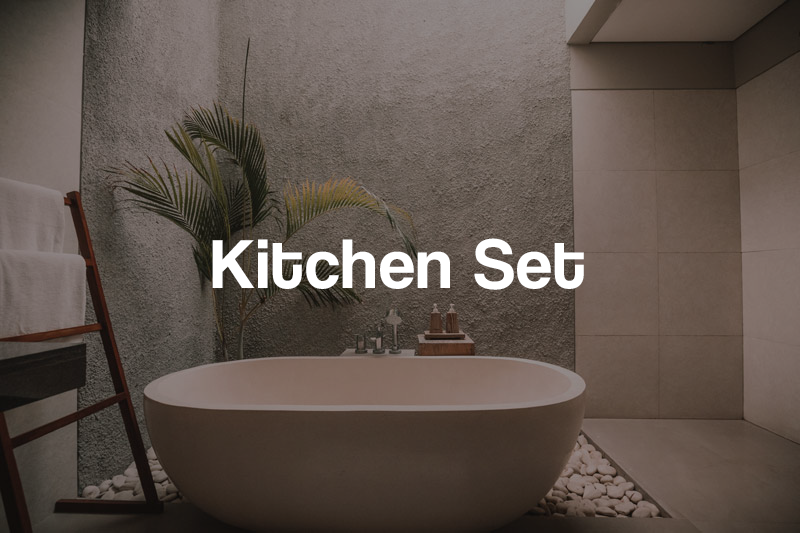
<style>
.page{position:relative;width:800px;height:533px}
.page>*{position:absolute;margin:0}
.t1{font:72px "CoolveticaRg-Regular";letter-spacing:0.025em;color:#ffffff}
</style>
<div class="page">
<p class="t1" style="left:212px;top:238px;width:372px;height:52px">Kitchen Set</p>
</div>
